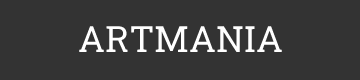
<style>
.page{position:relative;width:360px;height:80px;background:#333333}
.page>*{position:absolute;margin:0}
.t1{font:36px "RobotoSlab-Regular";color:#ffffff}
</style>
<div class="page">
<p class="t1" style="left:79px;top:26px;width:203px;height:26px">ARTMANIA</p>
</div>
